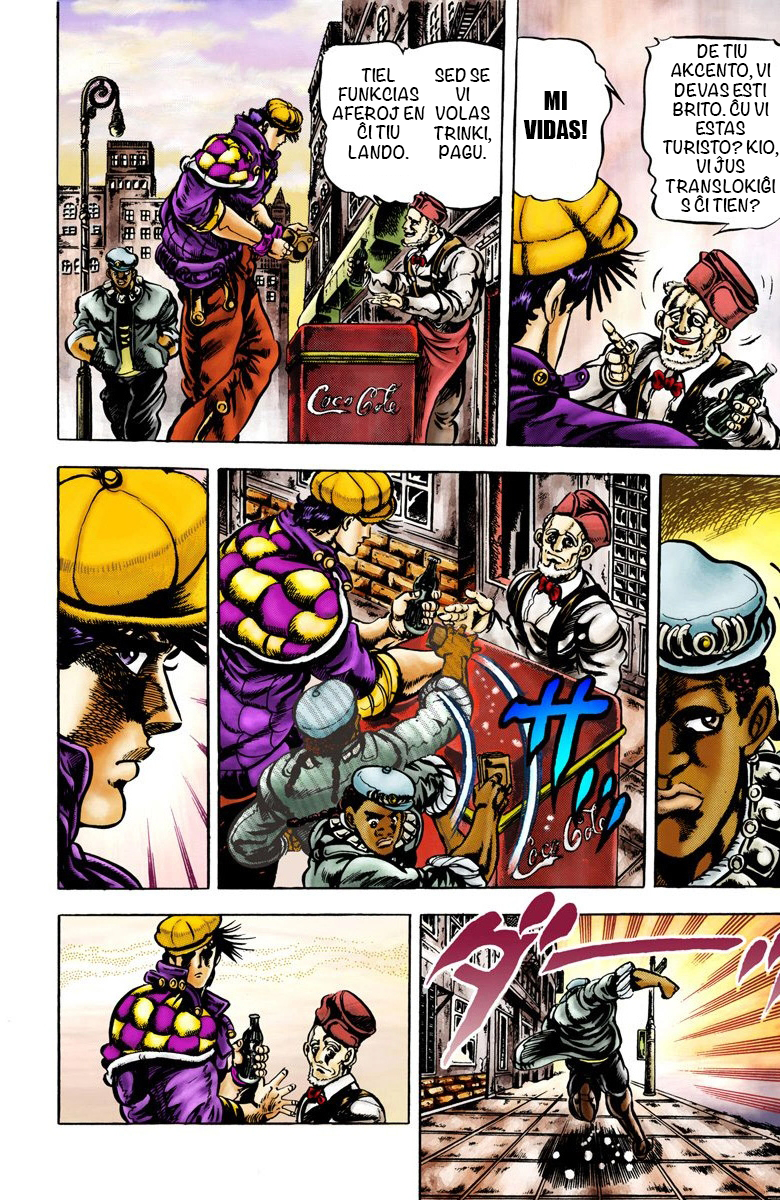
<style>
.page{position:relative;width:780px;height:1200px}
.page>*{position:absolute;margin:0}
.t1{font:16px "Noteworthy-Bold";color:#000000}
.t2{font:24px "Impact";color:#000000}
</style>
<div class="page">
<p class="t1" style="left:662px;top:44px;width:117px;height:168px;text-align:center">DE TIU AKCENTO, VI DEVAS ESTI BRITO. ĈU VI ESTAS TURISTO? KIO, VI ĴUS TRANSLOKIĜIS ĈI TIEN?</p>
<p class="t1" style="left:332px;top:68px;width:93px;height:91px;text-align:center">TIEL FUNKCIAS AFEROJ EN ĈI TIU LANDO.</p>
<p class="t1" style="left:433px;top:68px;width:59px;height:91px;text-align:center">SED SE VI VOLAS TRINKI, PAGU.</p>
<p class="t2" style="left:523px;top:91px;width:64px;height:48px;text-align:center">MI VIDAS!</p>
</div>
